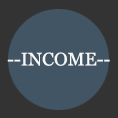
<style>
.page{position:relative;width:118px;height:118px;background:#415565}
.page>*{position:absolute;margin:0}
.t1{font:18.3px "Georgia";color:#f6f6f6}
</style>
<div class="page">
<p class="t1" style="left:7px;top:52px;width:103px;height:14px">--INCOME--</p>
</div>
